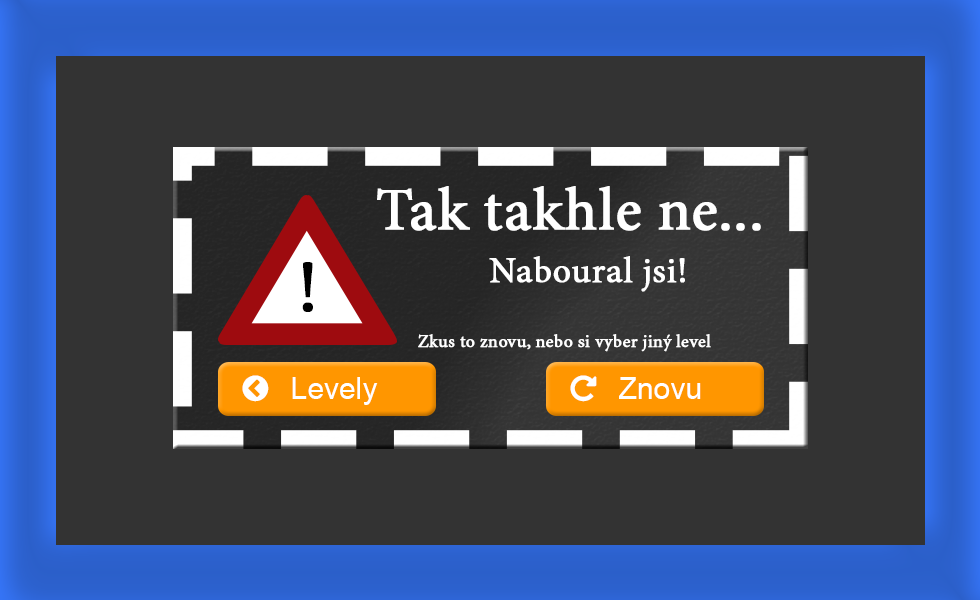
<style>
.page{position:relative;width:980px;height:600px;background:#333333}
.page>*{position:absolute;margin:0}
.t1{font:60px "MinionPro-Regular";color:#ffffff;font-weight:bold}
.t2{font:18px "MinionPro-Regular";color:#ffffff;font-weight:bold}
.t3{font:36px "MinionPro-Regular";color:#ffffff;font-weight:bold}
.t4{font:72px "MinionPro-Regular";color:#000000;font-weight:bold}
</style>
<div class="page">
<p class="t1" style="left:377px;top:186px;width:384px;height:45px">Tak takhle ne...</p>
<p class="t2" style="left:418px;top:256px;width:293px;height:96px"><span class="t3">  Naboural jsi!<br><br></span>Zkus to znovu, nebo si vyber jiný level</p>
<p class="t4" style="left:302px;top:262px;width:11px;height:50px">!</p>
</div>
